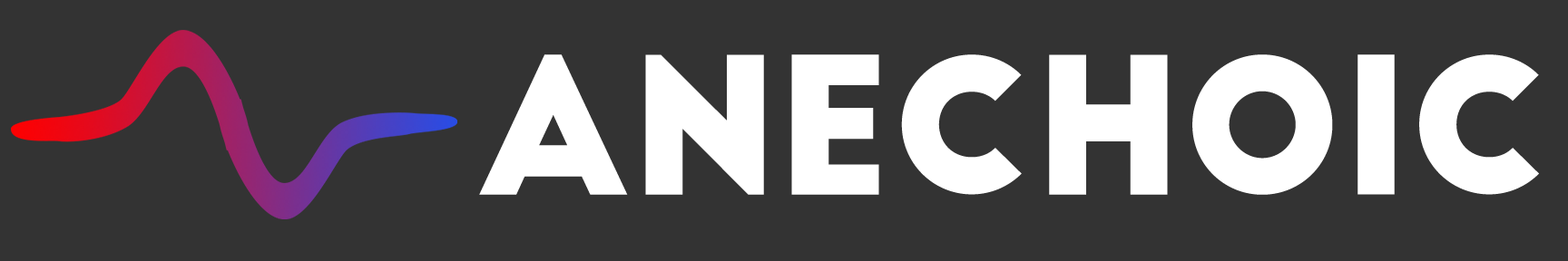
<style>
.page{position:relative;width:1568px;height:261px;background:#333333}
.page>*{position:absolute;margin:0}
.t1{font:186.3px "BigJohn";color:#ffffff}
</style>
<div class="page">
<p class="t1" style="left:479px;top:54px;width:1060px;height:141px">Anechoic</p>
</div>
